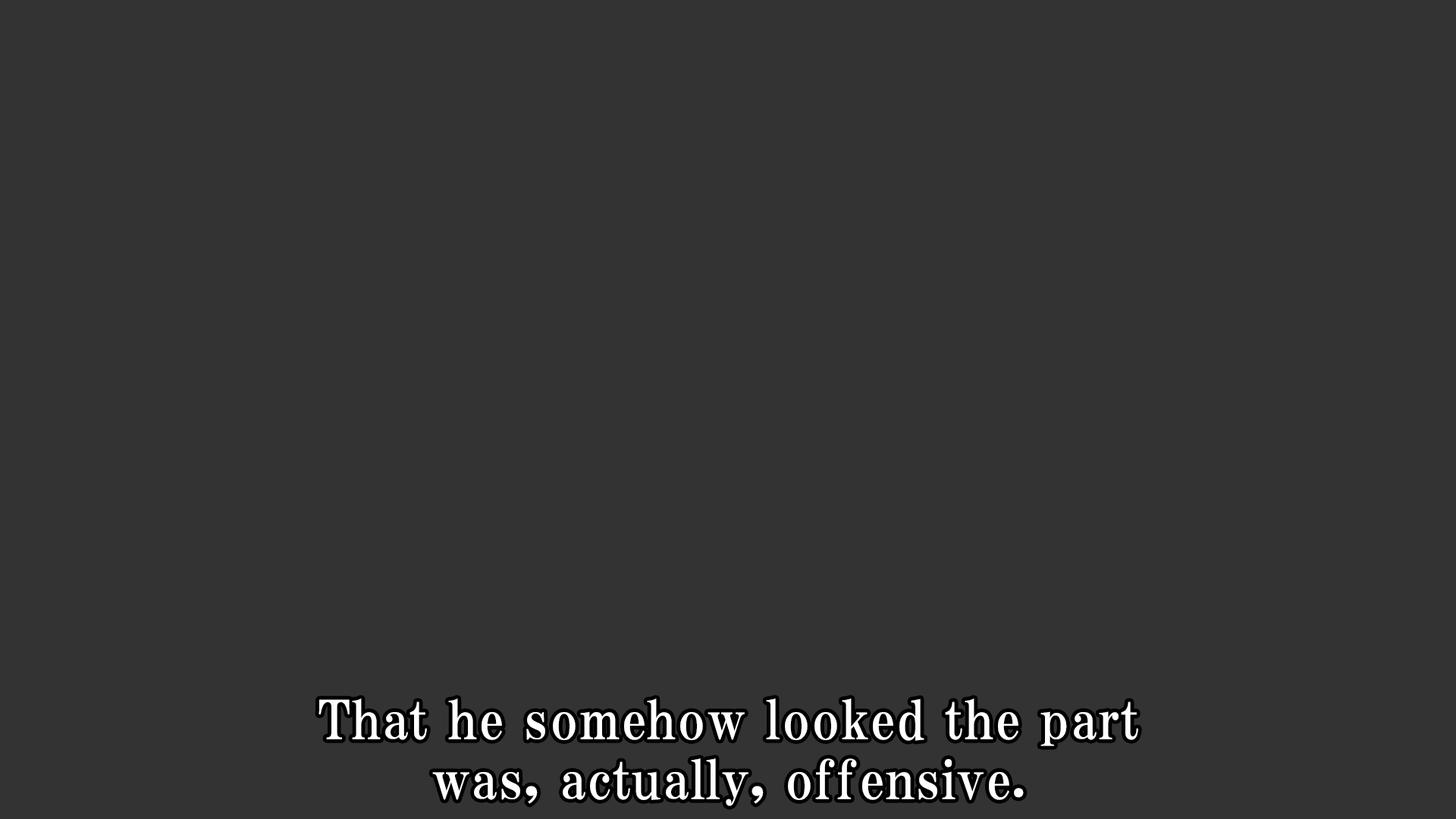
<style>
.page{position:relative;width:1456px;height:819px;background:#333333}
.page>*{position:absolute;margin:0}
.t1{font:53.1px/59.9px "HGPMinchoE";letter-spacing:0.025em;color:#ffffff}
</style>
<div class="page">
<p class="t1" style="left:318px;top:698px;width:820px;height:108px;text-align:center">That he somehow looked the part<br>was, actually, offensive.</p>
</div>
